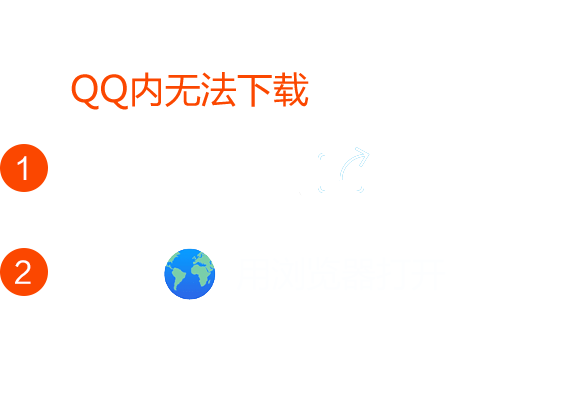
<style>
.page{position:relative;width:565px;height:411px;background:#ffffff}
.page>*{position:absolute;margin:0}
.t1{font:36px "MicrosoftYaHei";color:#fb4700}
</style>
<div class="page">
<p class="t1" style="left:71px;top:72px;width:238px;height:38px">QQ内无法下载</p>
</div>
